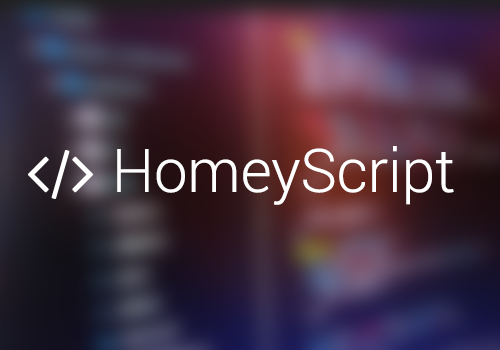
<style>
.page{position:relative;width:500px;height:350px}
.page>*{position:absolute;margin:0}
.t1{font:60px "Roboto-Light";color:#ffffff}
</style>
<div class="page">
<p class="t1" style="left:117px;top:146px;width:337px;height:59px">HomeyScript</p>
</div>
